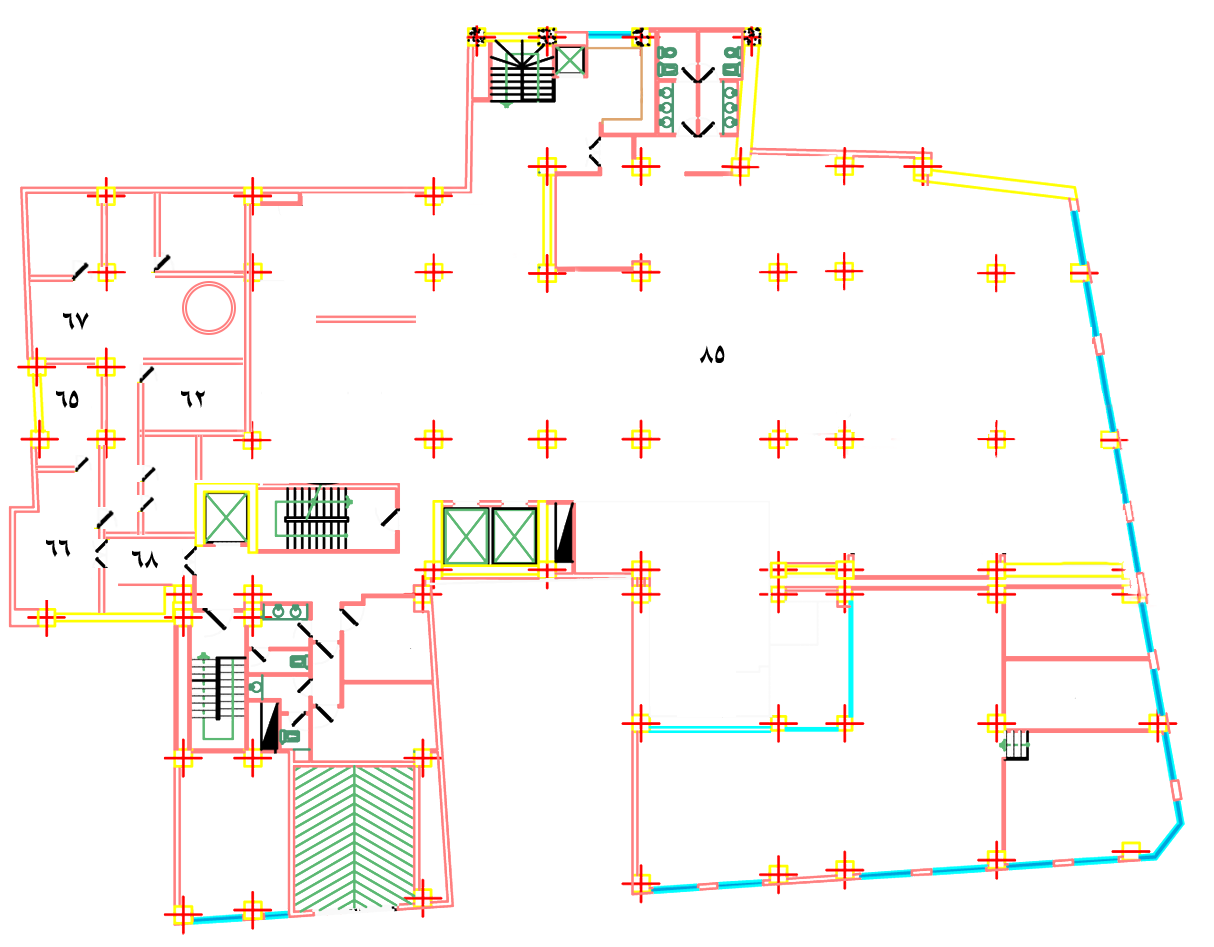
<style>
.page{position:relative;width:1214px;height:947px;background:#ffffff}
.page>*{position:absolute;margin:0}
.t1{font:33.3px "BKourosh";color:#000000}
</style>
<div class="page">
<p class="t1" style="left:63px;top:312px;width:26px;height:18px">67</p>
<p class="t1" style="left:699px;top:345px;width:26px;height:19px">85</p>
<p class="t1" style="left:56px;top:390px;width:23px;height:18px">65</p>
<p class="t1" style="left:181px;top:390px;width:24px;height:18px">62</p>
<p class="t1" style="left:46px;top:539px;width:25px;height:18px">66</p>
<p class="t1" style="left:132px;top:550px;width:26px;height:19px">68</p>
</div>
